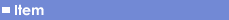
<style>
.page{position:relative;width:229px;height:20px;background:#7289d5}
.page>*{position:absolute;margin:0}
.t1{font:14px "CenturyGothic-Bold";color:#ffffff}
</style>
<div class="page">
<p class="t1" style="left:15px;top:4px;width:29px;height:12px">Item</p>
</div>
